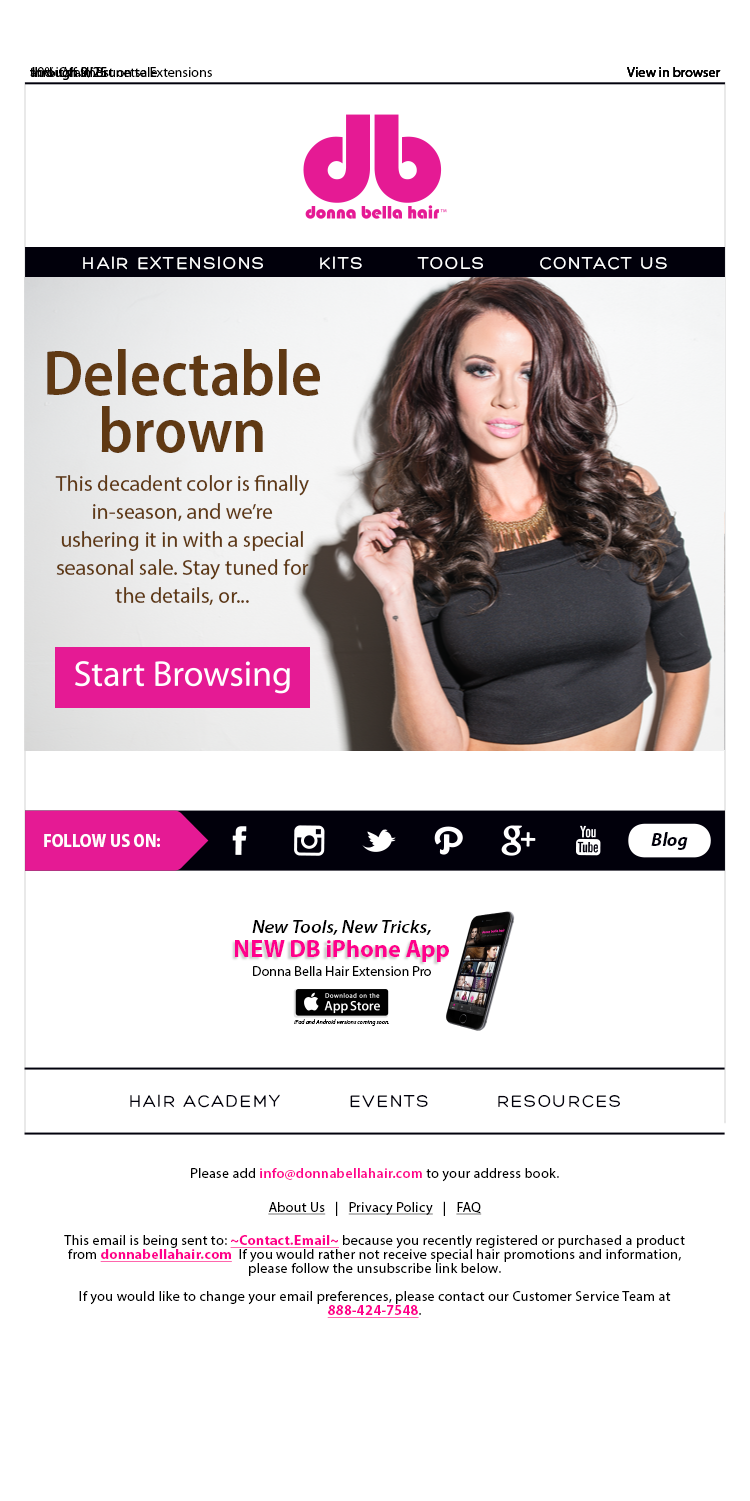
<style>
.page{position:relative;width:750px;height:1501px;background:#ffffff}
.page>*{position:absolute;margin:0}
.t1{font:14px "MyriadPro-Regular";color:#000000}
.t2{font:18px "Hero";letter-spacing:0.1em;color:#ffffff}
.t3{font:64.8px/56.7px "MyriadPro-SemiboldSemiCn";color:#603913}
.t4{font:21.6px/27.9px "MyriadPro-Regular";color:#603913}
.t5{font:18.6px "MyriadPro-BoldIt";color:#01000b}
.t6{font:18px "MyriadPro-BoldSemiCn";color:#ffffff}
.t7{font:18px "MyriadPro-SemiboldSemiExtIt";color:#000000}
.t8{font:24px "MyriadPro-Bold";color:#ff008c}
.t9{font:6px "MyriadPro-It";color:#000000}
.t10{font:18px "Hero";letter-spacing:0.1em;color:#01000b}
.t11{font:14px/14px "MyriadPro-Regular";letter-spacing:0.025em;color:#000000}
.t12{font:14px "MyriadPro-Regular";letter-spacing:0.025em;color:#000000}
.t13{font:14px "MyriadPro-Semibold";letter-spacing:0.025em;color:#ff008c}
.t14{font:14px "MyriadPro-Regular";letter-spacing:0.025em;color:#000000;text-decoration:underline}
.t15{font:14px "MyriadPro-Bold";letter-spacing:0.025em;color:#ff008c;text-decoration:underline}
.t16{font:14px/14px "MyriadPro-Bold";letter-spacing:0.025em;color:#ff008c;text-decoration:underline}
</style>
<div class="page">
<p class="t1" style="left:30px;top:67px;width:77px;height:13px">through 9/25</p>
<p class="t1" style="left:30px;top:67px;width:77px;height:13px">through 9/25</p>
<p class="t1" style="left:30px;top:66px;width:127px;height:11px">and it’s almost on sale</p>
<p class="t1" style="left:31px;top:67px;width:181px;height:10px">10% Off all Brunette Extensions</p>
<p class="t1" style="left:627px;top:67px;width:94px;height:10px">View in browser</p>
<p class="t1" style="left:627px;top:67px;width:94px;height:10px">View in browser</p>
<p class="t1" style="left:627px;top:67px;width:94px;height:10px">View in browser</p>
<p class="t1" style="left:627px;top:67px;width:94px;height:10px">View in browser</p>
<p class="t2" style="left:83px;top:256px;width:584px;height:14px">HAIR EXTENSIONS        KITS        TOOLS        CONTACT US</p>
<p class="t3" style="left:47px;top:349px;width:273px;height:104px;text-align:center">Delectable <br>brown</p>
<p class="t4" style="left:55px;top:475px;width:254px;height:131px;text-align:center">This decadent color is finally in-season, and we’re ushering it in with a special seasonal sale. Stay tuned for the details, or...</p>
<p class="t5" style="left:651px;top:832px;width:37px;height:18px">Blog</p>
<p class="t6" style="left:44px;top:834px;width:116px;height:13px">FOLLOW US ON:</p>
<p class="t7" style="left:252px;top:920px;width:179px;height:15px">New Tools, New Tricks,</p>
<p class="t8" style="left:235px;top:940px;width:214px;height:22px">NEW DB iPhone App</p>
<p class="t1" style="left:253px;top:966px;width:178px;height:10px">Donna Bella Hair Extension Pro</p>
<p class="t9" style="left:294px;top:1019px;width:95px;height:7px">iPad and Android versions coming soon.</p>
<p class="t10" style="left:130px;top:1094px;width:490px;height:14px">HAIR ACADEMY          EVENTS          RESOURCES</p>
<p class="t11" style="left:64px;top:1168px;width:621px;height:150px;text-align:center"><span class="t12">Please add </span><span class="t13">info@donnabellahair.com</span><span class="t12"> to your address book.<br><br></span><span class="t14">About Us</span><span class="t12">   |   </span><span class="t14">Privacy Policy</span><span class="t12">   |   </span><span class="t14">FAQ<br></span><span class="t12"><br>This email is being sent to: </span><span class="t15">~Contact.Email~</span><span class="t12"> because you recently registered </span>or purchased a product from <span class="t16">donnabellahair.com</span>  If you would rather not receive special hair promotions and information, please follow the unsubscribe link below.<br><br>If you would like to change your email preferences, please contact our Customer Service Team at <span class="t16">888-424-7548</span>.</p>
</div>
